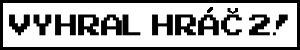
<style>
.page{position:relative;width:300px;height:50px;background:#ffffff}
.page>*{position:absolute;margin:0}
.t1{font:41.7px "ArcadeClassic";color:#000000}
.t2{font:12.5px "ArcadeClassic";color:#000000;scale:1.69 1}
</style>
<div class="page">
<p class="t1" style="left:9px;top:14px;width:279px;height:22px">Vyhral Hrac 2!</p>
<p class="t2" style="left:227px;top:8px;width:11px;height:6px">v</p>
</div>
